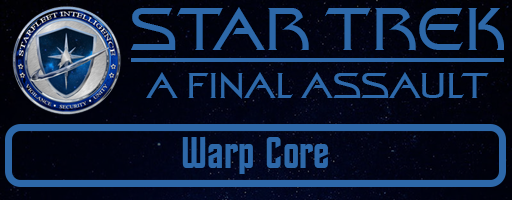
<style>
.page{position:relative;width:512px;height:200px}
.page>*{position:absolute;margin:0}
.t1{font:60px "StarTrekFilmBT-Regular";color:#2d68a9}
.t2{font:36px "StarTrekFilmBT-Regular";color:#2d68a9}
.t3{font:44px "StarTrekBT-Regular";color:#2d68a9}
</style>
<div class="page">
<p class="t1" style="left:131px;top:7px;width:373px;height:43px">STAR TREK</p>
<p class="t2" style="left:146px;top:72px;width:343px;height:27px">A FINAL ASSAULT</p>
<p class="t3" style="left:182px;top:137px;width:146px;height:37px">Warp Core</p>
</div>
